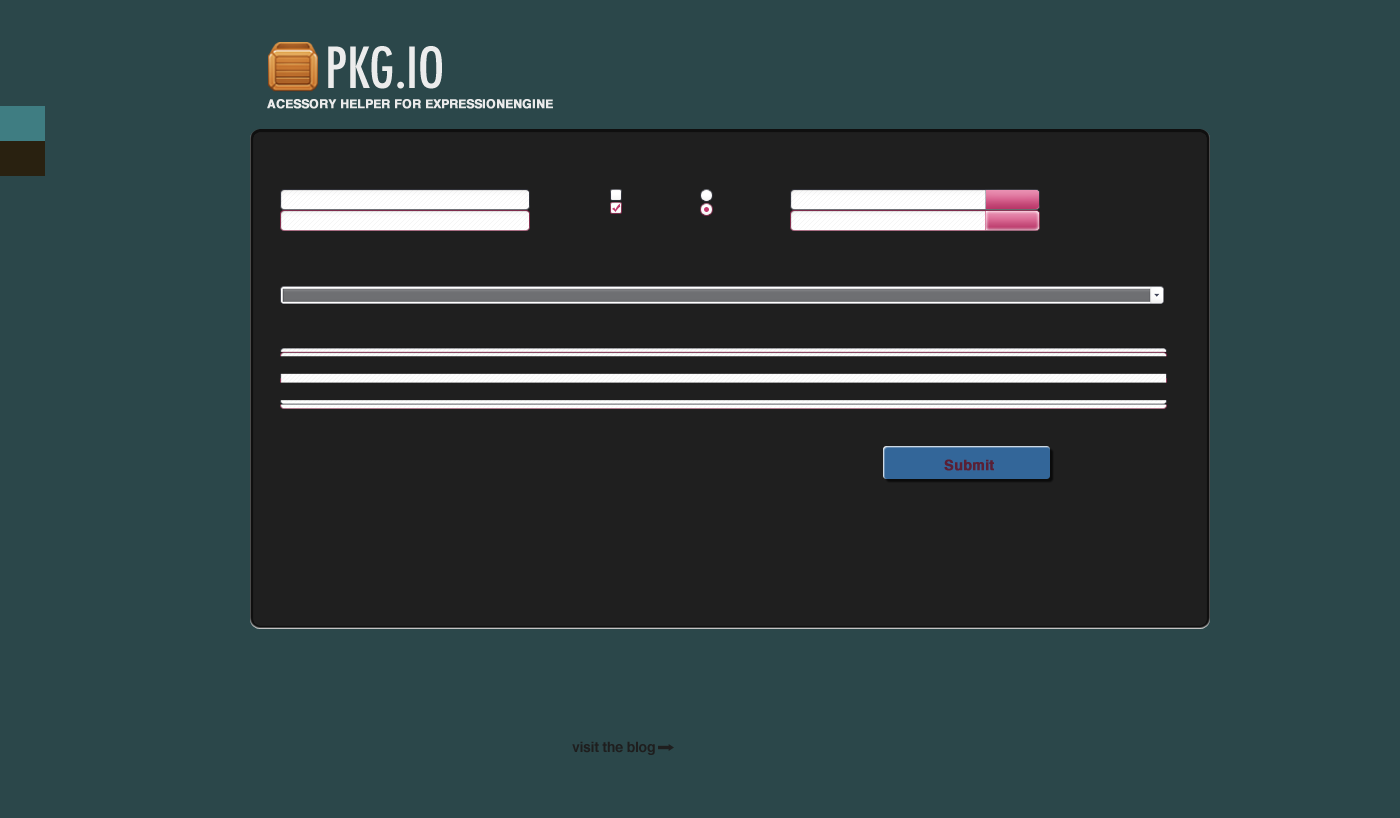
<style>
.page{position:relative;width:1400px;height:818px;background:#2b474a}
.page>*{position:absolute;margin:0}
.t1{font:55px "Futura-CondensedMedium";color:#ececec}
.t2{font:12px "Helvetica-Bold";color:#ebebeb;font-weight:bold}
.t3{font:14px "Helvetica-Bold";color:#591f35;font-weight:bold}
.t4{font:14px "Helvetica-Bold";letter-spacing:-0.033em;color:#1e1e1e}
</style>
<div class="page">
<p class="t1" style="left:328px;top:46px;width:114px;height:43px">PKG.IO</p>
<p class="t2" style="left:267px;top:99px;width:286px;height:10px">ACESSORY HELPER FOR EXPRESSIONENGINE</p>
<p class="t3" style="left:944px;top:459px;width:50px;height:12px">Submit</p>
<p class="t4" style="left:572px;top:741px;width:83px;height:14px">visit the blog</p>
</div>
